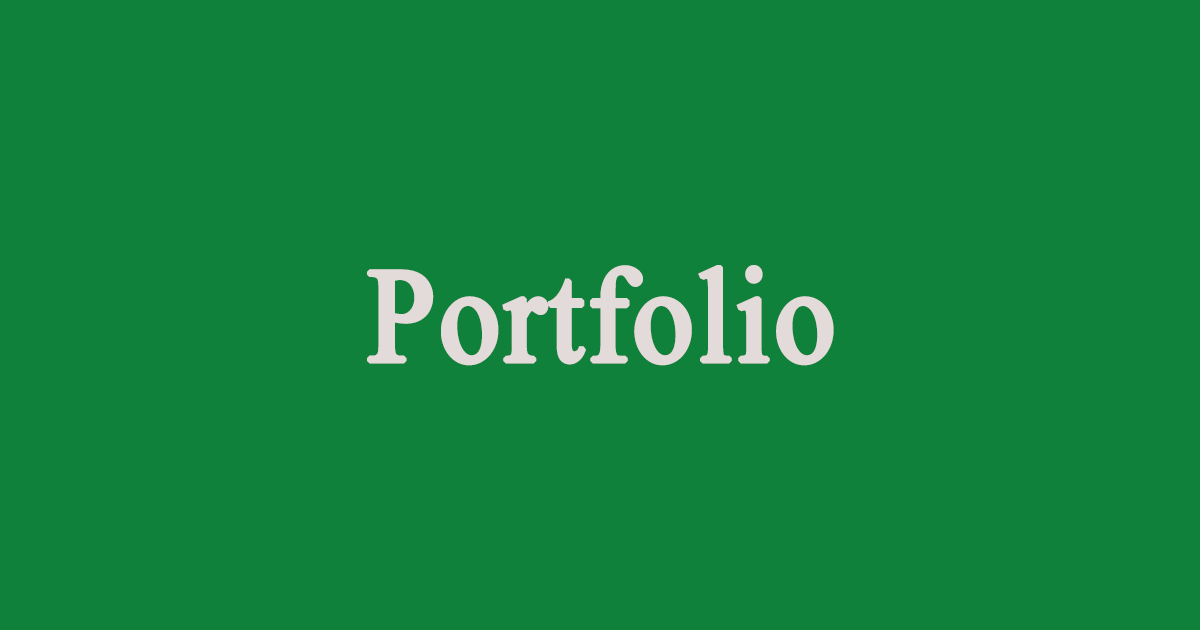
<style>
.page{position:relative;width:1200px;height:630px;background:#10813a}
.page>*{position:absolute;margin:0}
.t1{font:200px "Microsoft-Himalaya";color:#e3dada;font-weight:bold;scale:0.9 1}
</style>
<div class="page">
<p class="t1" style="left:367px;top:265px;width:467px;height:101px">Portfolio</p>
</div>
